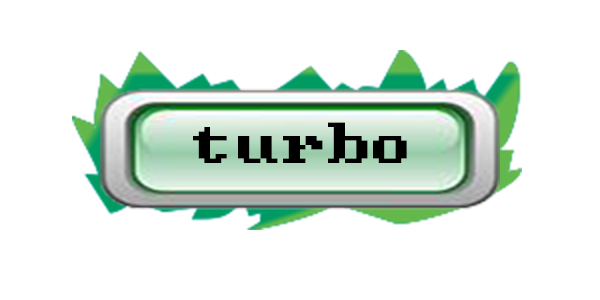
<style>
.page{position:relative;width:600px;height:300px;background:#ffffff}
.page>*{position:absolute;margin:0}
.t1{font:72px "Terminal";color:#000000}
</style>
<div class="page">
<p class="t1" style="left:193px;top:122px;width:214px;height:41px">turbo</p>
</div>
